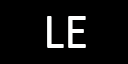
<style>
.page{position:relative;width:128px;height:64px;background:#000000}
.page>*{position:absolute;margin:0}
.t1{font:50px "Calibri";color:#feffff}
</style>
<div class="page">
<p class="t1" style="left:47px;top:16px;width:39px;height:32px">LE</p>
</div>
